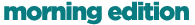
<style>
.page{position:relative;width:195px;height:25px;background:#ffffff}
.page>*{position:absolute;margin:0}
.t1{font:25px "GothamBlack";letter-spacing:-0.05em;color:#087c80}
</style>
<div class="page">
<p class="t1" style="left:4px;top:1px;width:185px;height:24px">morning edition</p>
</div>
